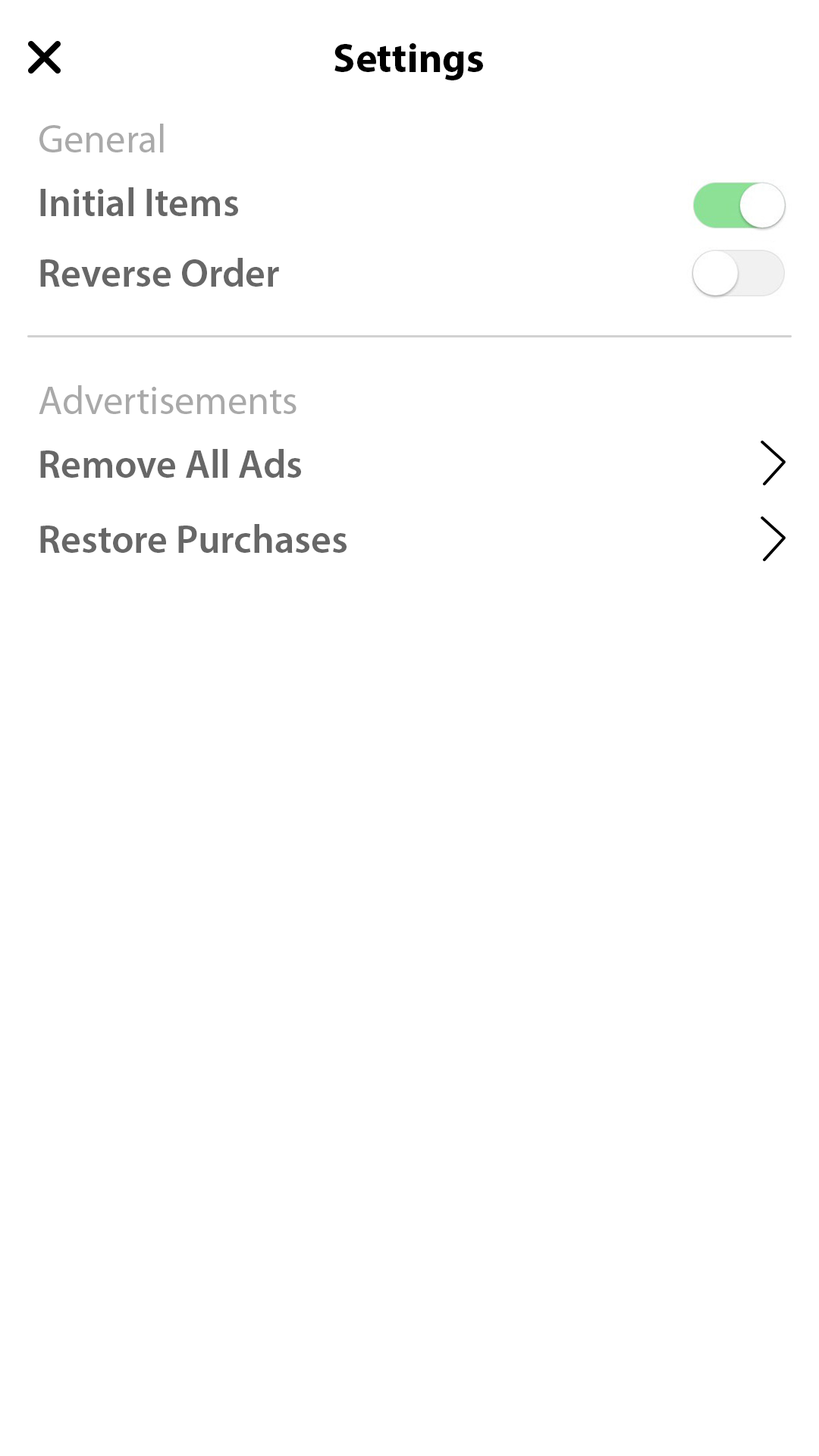
<style>
.page{position:relative;width:819px;height:1456px;background:#ffffff}
.page>*{position:absolute;margin:0}
.t1{font:40.9px "MyriadPro-Bold";color:#000000}
.t2{font:39.6px "MyriadPro-Regular";color:#aaaaaa}
.t3{font:39.6px "MyriadPro-Semibold";color:#676767}
.t4{font:39.6px "MyriadPro-Regular";color:#a9a9a9}
</style>
<div class="page">
<p class="t1" style="left:334px;top:43px;width:149px;height:37px">Settings</p>
<p class="t2" style="left:39px;top:124px;width:125px;height:28px">General</p>
<p class="t3" style="left:40px;top:187px;width:198px;height:29px">Initial Items</p>
<p class="t3" style="left:40px;top:258px;width:239px;height:29px">Reverse Order</p>
<p class="t4" style="left:39px;top:385px;width:258px;height:29px">Advertisements</p>
<p class="t3" style="left:40px;top:449px;width:261px;height:29px">Remove All Ads</p>
<p class="t3" style="left:40px;top:524px;width:307px;height:29px">Restore Purchases</p>
</div>
